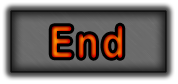
<style>
.page{position:relative;width:178px;height:84px}
.page>*{position:absolute;margin:0}
.t1{font:43.2px "ArialRoundedMTBold";letter-spacing:0.1em;scale:0.83 1}
</style>
<div class="page">
<p class="t1" style="left:51px;top:25px;width:72px;height:33px">End</p>
</div>
